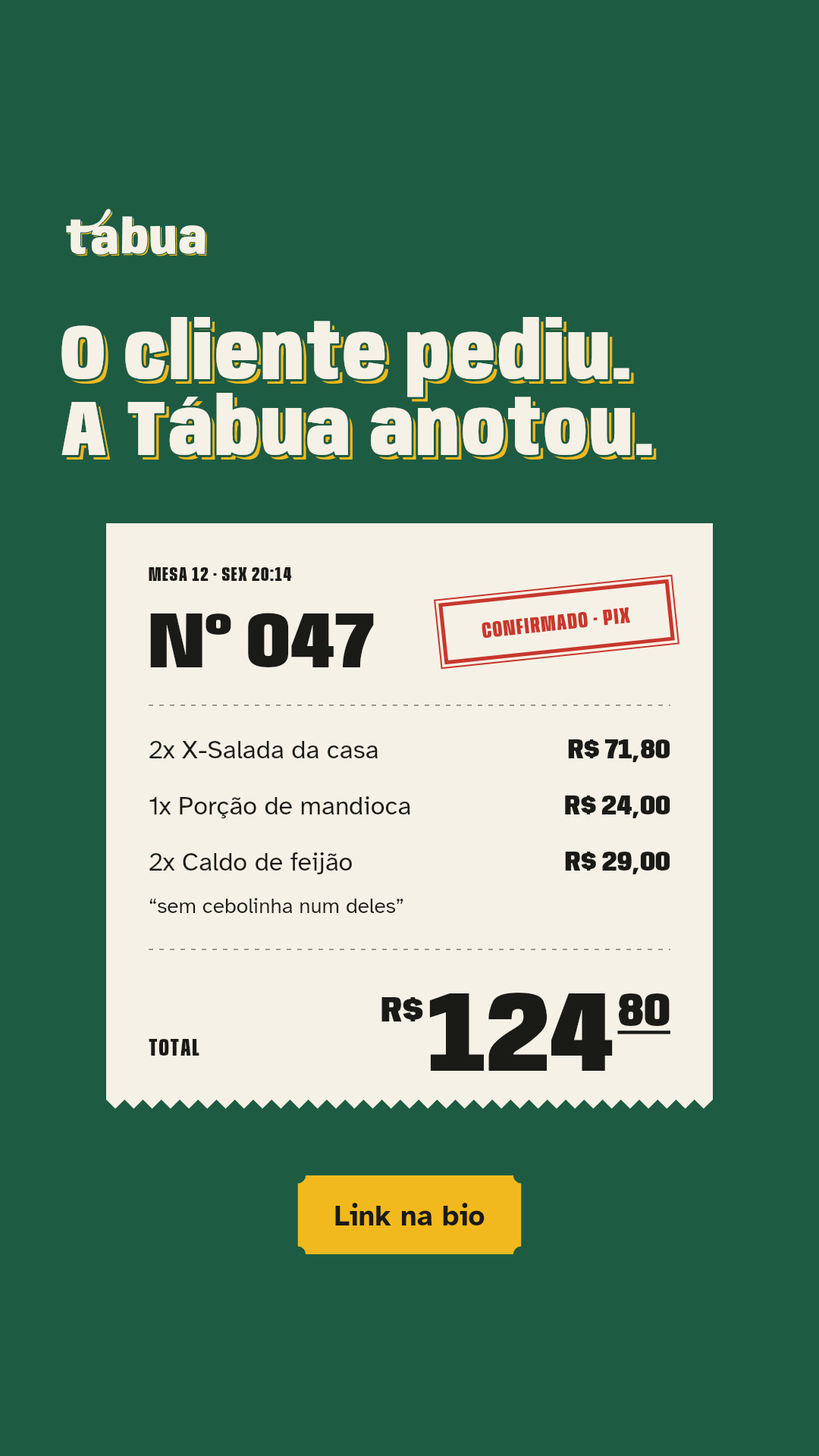
<style>
.page{position:relative;width:819px;height:1456px;background:#1e5b43}
.page>*{position:absolute;margin:0}
.t1{font:78.9px/75.8px "Anybody-Black-W75";letter-spacing:0.034em;color:#f6f1e6}
.t2{font:78.9px/75.8px "Anybody-Black-W75";letter-spacing:0.034em}
.t3{font:19.7px "Anybody-ExtraBold-W60";letter-spacing:0.06em;color:#1a1a17}
.t4{font:78.9px "Anybody-Black-W80";color:#1a1a17}
.t5{font:22.7px "Anybody-ExtraBold-W60";letter-spacing:0.06em;color:#c8372d}
.t6{font:25.8px "AtkinsonHyperlegible-Regular";color:#1a1a17}
.t7{font:27.3px "Anybody-Black-W80";color:#1a1a17}
.t8{font:21.2px "AtkinsonHyperlegible-Regular";color:#1a1a17}
.t9{font:36.4px "Anybody-Black-W80";color:#1a1a17}
.t10{font:113.7px "Anybody-Black-W80";color:#1a1a17}
.t11{font:47.8px "Anybody-Black-W80";color:#1a1a17;text-decoration:underline}
.t12{font:24.3px "Anybody-ExtraBold-W60";letter-spacing:0.06em;color:#1a1a17}
.t13{font:28.8px "AtkinsonHyperlegible-Bold";color:#1a1a17}
</style>
<div class="page">
<p class="t1" style="left:59px;top:315px;width:595px;height:142px">O cliente pediu.<br>A Tábua anotou.</p>
<p class="t2" style="left:66px;top:322px;width:591px;height:138px">O cliente pediu.<br>A Tábua anotou.</p>
<p class="t3" style="left:149px;top:567px;width:143px;height:14px">MESA 12 · SEX 20:14</p>
<p class="t4" style="left:150px;top:613px;width:224px;height:54px">Nº 047</p>
<p class="t5" style="left:482px;top:607px;width:149px;height:32px;rotate:-6deg">CONFIRMADO · PIX</p>
<p class="t6" style="left:149px;top:741px;width:229px;height:17px">2x X-Salada da casa</p>
<p class="t7" style="left:568px;top:739px;width:102px;height:23px">R$ 71,80</p>
<p class="t6" style="left:149px;top:796px;width:261px;height:23px">1x Porção de mandioca</p>
<p class="t7" style="left:565px;top:795px;width:105px;height:23px">R$ 24,00</p>
<p class="t6" style="left:149px;top:852px;width:203px;height:22px">2x Caldo de feijão</p>
<p class="t7" style="left:565px;top:852px;width:105px;height:22px">R$ 29,00</p>
<p class="t8" style="left:149px;top:898px;width:254px;height:15px">“sem cebolinha num deles”</p>
<p class="t9" style="left:381px;top:997px;width:42px;height:24px">R$</p>
<p class="t10" style="left:429px;top:993px;width:184px;height:78px">124</p>
<p class="t11" style="left:617px;top:993px;width:53px;height:41px">80</p>
<p class="t12" style="left:149px;top:1039px;width:50px;height:17px">TOTAL</p>
<p class="t13" style="left:335px;top:1203px;width:150px;height:22px">Link na bio</p>
</div>
